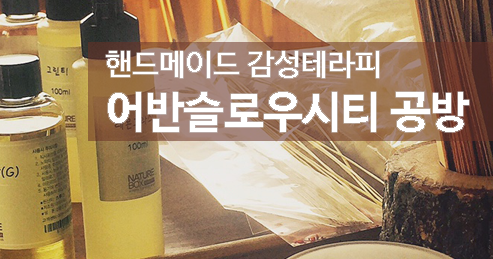
<style>
.page{position:relative;width:493px;height:259px}
.page>*{position:absolute;margin:0}
.t1{font:30px "NanumBarunGothic";color:#ffffff}
.t2{font:44px "NanumBarunGothicBold";color:#ffffff}
</style>
<div class="page">
<p class="t1" style="left:106px;top:51px;width:273px;height:27px">핸드메이드 감성테라피</p>
<p class="t2" style="left:108px;top:92px;width:361px;height:40px">어반슬로우시티 공방</p>
</div>
